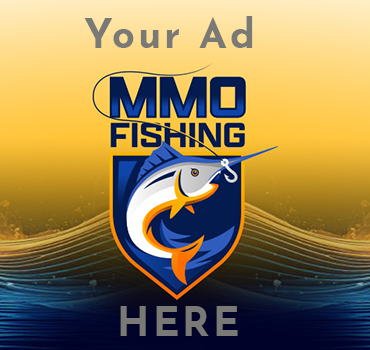
<style>
.page{position:relative;width:370px;height:350px}
.page>*{position:absolute;margin:0}
.t1{font:40px "JosefinSans-Bold";letter-spacing:0.075em;color:#797976}
</style>
<div class="page">
<p class="t1" style="left:84px;top:16px;width:169px;height:32px">Your Ad</p>
<p class="t1" style="left:120px;top:306px;width:118px;height:30px">HERE</p>
</div>
